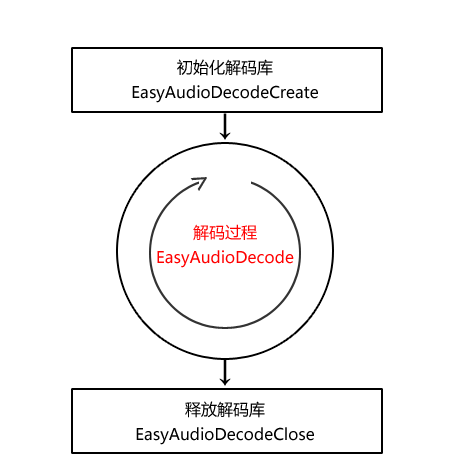
<style>
.page{position:relative;width:466px;height:472px;background:#ffffff}
.page>*{position:absolute;margin:0}
.t1{font:16px/24.6px "MicrosoftYaHei";color:#000000}
.t2{font:30px "MicrosoftYaHei";color:#000000}
.t3{font:30px "MicrosoftYaHei";color:#333333}
.t4{font:16px/24.6px "MicrosoftYaHei";color:#ff0000}
</style>
<div class="page">
<p class="t1" style="left:132px;top:59px;width:186px;height:44px;text-align:center">初始化解码库<br>EasyAudioDecodeCreate</p>
<p class="t2" style="left:219px;top:113px;width:12px;height:27px">↓</p>
<p class="t3" style="left:190px;top:177px;width:17px;height:14px;rotate:-33deg">&gt;</p>
<p class="t4" style="left:157px;top:224px;width:137px;height:44px;text-align:center">解码过程<br>EasyAudioDecode</p>
<p class="t2" style="left:219px;top:359px;width:12px;height:27px">↓</p>
<p class="t1" style="left:136px;top:401px;width:178px;height:44px;text-align:center">释放解码库<br>EasyAudioDecodeClose</p>
</div>
